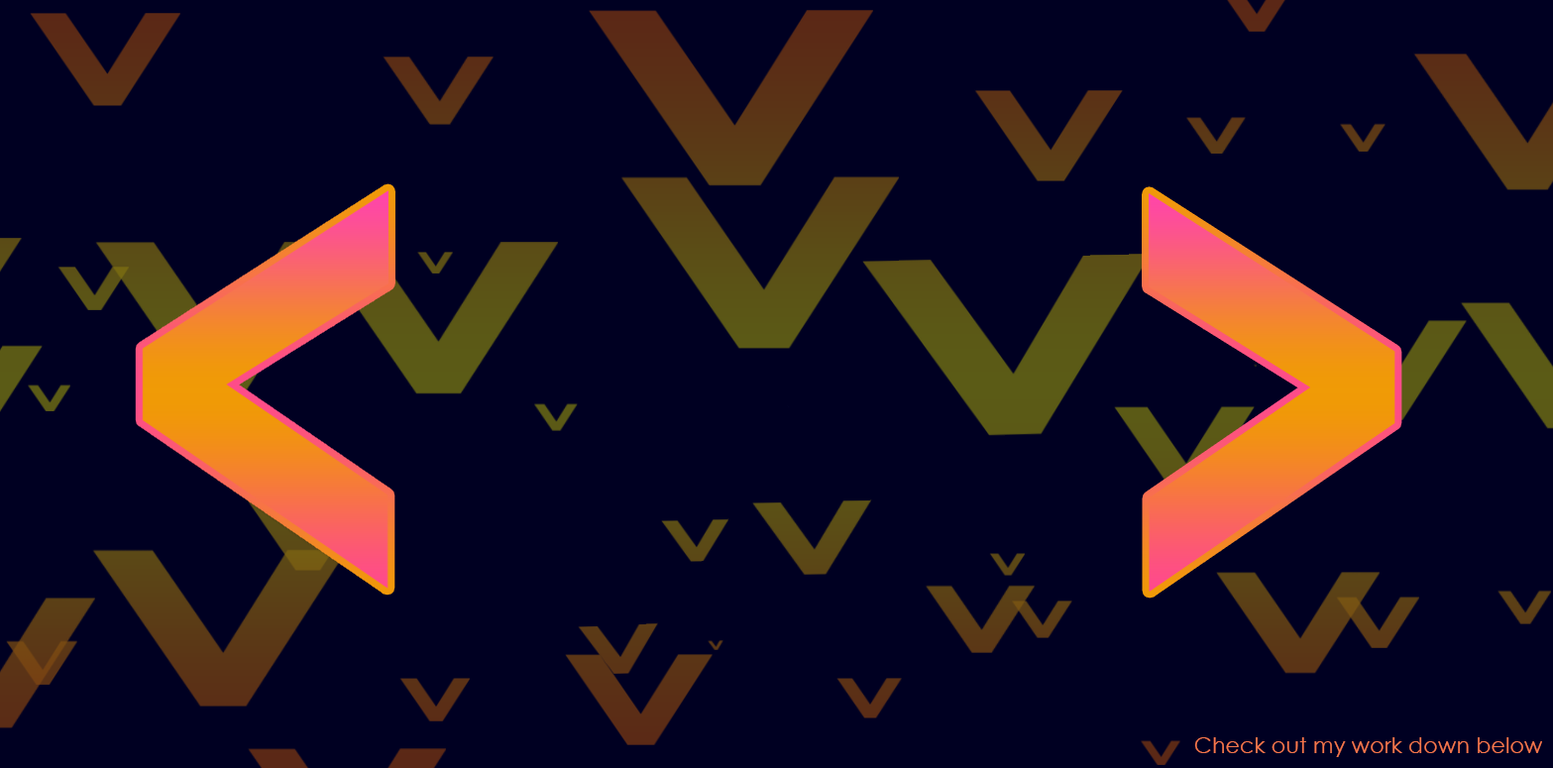
<style>
.page{position:relative;width:1553px;height:768px;background:#000022}
.page>*{position:absolute;margin:0}
.t1{font:22.1px "CenturyGothic";color:#f6774c}
</style>
<div class="page">
<p class="t1" style="left:1194px;top:737px;width:348px;height:20px">Check out my work down below</p>
</div>
